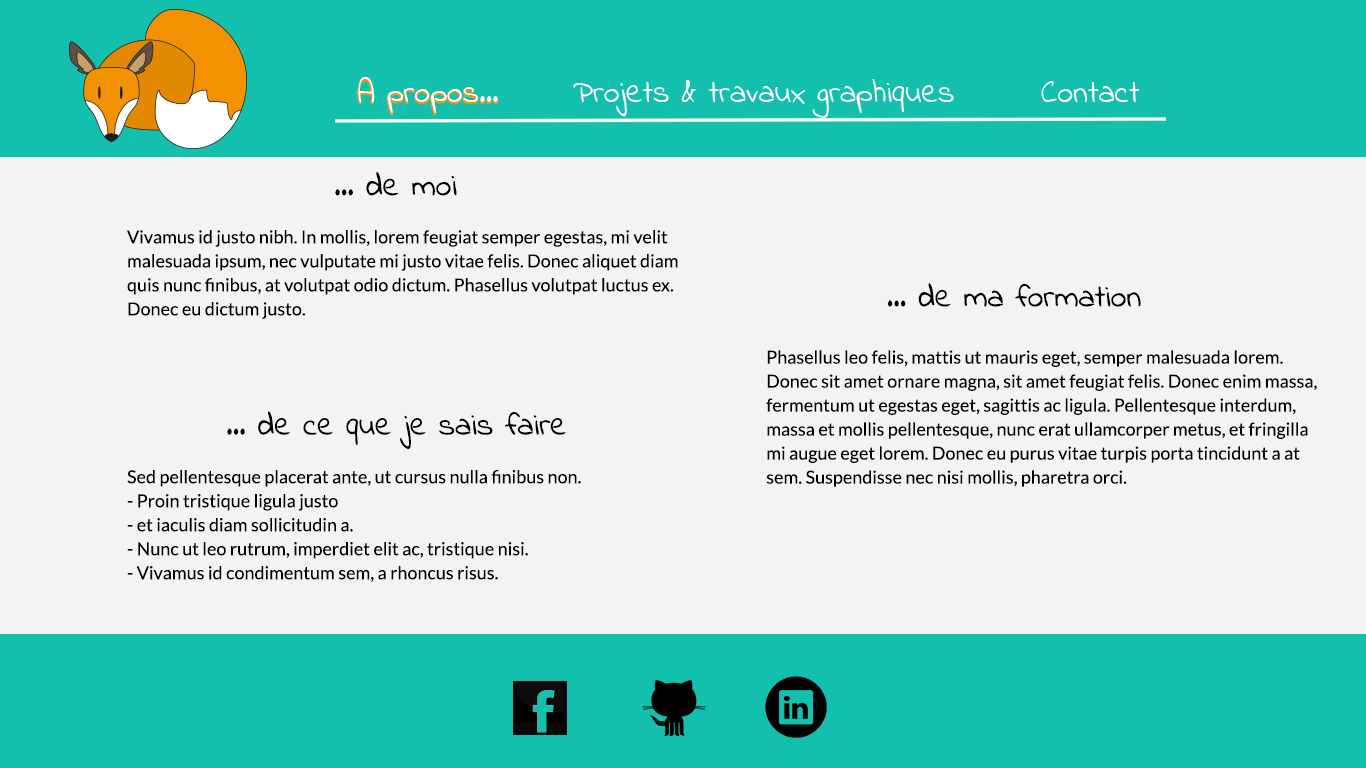
<style>
.page{position:relative;width:1366px;height:768px;background:#f3f3f3}
.page>*{position:absolute;margin:0}
.t1{font:24px "IndieFlower";letter-spacing:-0.025em;font-weight:bold}
.t2{font:24px/48px "IndieFlower";color:#ffffff}
.t3{font:24px "IndieFlower";color:#000000}
.t4{font:23.8px "IndieFlower";color:#000000}
.t5{font:18px/24px "Lato-Regular";color:#000000}
</style>
<div class="page">
<p class="t1" style="left:356px;top:78px;width:143px;height:38px">A propos...</p>
<p class="t2" style="left:357px;top:77px;width:783px;height:41px">A propos...   Projets &amp; travaux graphiques   Contact</p>
<p class="t3" style="left:335px;top:172px;width:122px;height:24px"><span class="t4">     </span>... de moi</p>
<p class="t5" style="left:127px;top:230px;width:551px;height:89px">Vivamus id justo nibh. In mollis, lorem feugiat semper egestas, mi velit malesuada ipsum, nec vulputate mi justo vitae felis. Donec aliquet diam quis nunc finibus, at volutpat odio dictum. Phasellus volutpat luctus ex. Donec eu dictum justo.</p>
<p class="t3" style="left:887px;top:283px;width:254px;height:24px">... de ma formation</p>
<p class="t5" style="left:766px;top:350px;width:551px;height:137px">Phasellus leo felis, mattis ut mauris eget, semper malesuada lorem. Donec sit amet ornare magna, sit amet feugiat felis. Donec enim massa, fermentum ut egestas eget, sagittis ac ligula. Pellentesque interdum, massa et mollis pellentesque, nunc erat ullamcorper metus, et fringilla mi augue eget lorem. Donec eu purus vitae turpis porta tincidunt a at sem. Suspendisse nec nisi mollis, pharetra orci.</p>
<p class="t3" style="left:227px;top:411px;width:339px;height:38px">... de ce que je sais faire</p>
<p class="t5" style="left:127px;top:470px;width:454px;height:112px">Sed pellentesque placerat ante, ut cursus nulla finibus non. <br>- Proin tristique ligula justo <br>- et iaculis diam sollicitudin a. <br>- Nunc ut leo rutrum, imperdiet elit ac, tristique nisi. <br>- Vivamus id condimentum sem, a rhoncus risus.</p>
</div>
